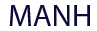
<style>
.page{position:relative;width:97px;height:31px;background:#ffffff}
.page>*{position:absolute;margin:0}
.t1{font:31px "MyriadPro-Regular";color:#090b38}
</style>
<div class="page">
<p class="t1" style="left:9px;top:5px;width:81px;height:21px">MANH</p>
</div>
